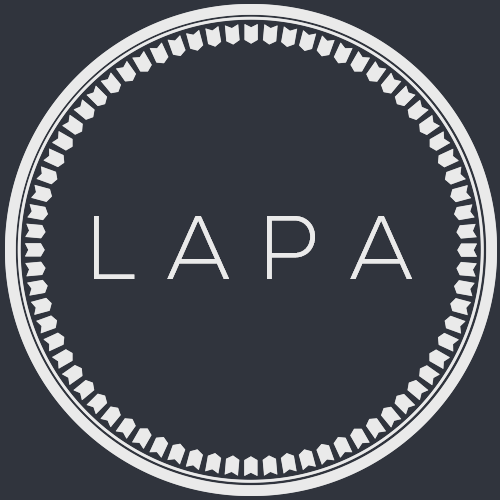
<style>
.page{position:relative;width:500px;height:500px;background:#30343d}
.page>*{position:absolute;margin:0}
.t1{font:90px "NexaLight";letter-spacing:0.34em;color:#eaeaea}
</style>
<div class="page">
<p class="t1" style="left:94px;top:216px;width:318px;height:63px">LAPA</p>
</div>
